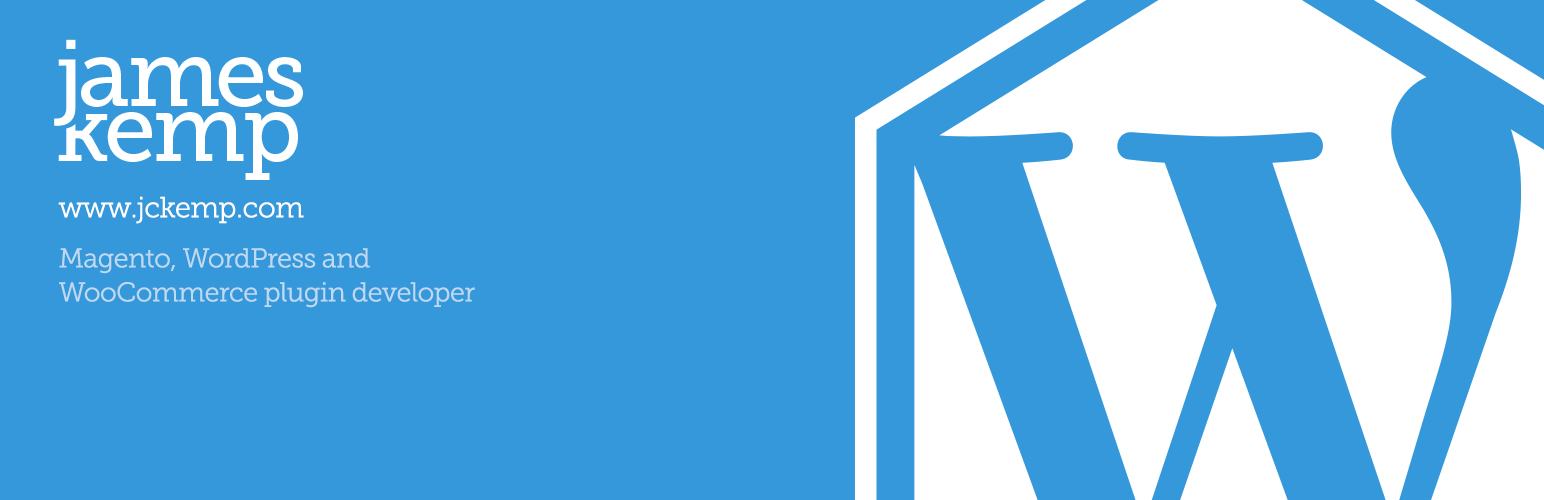
<style>
.page{position:relative;width:1544px;height:500px;background:#3498db}
.page>*{position:absolute;margin:0}
.t1{font:27px/34px "MuseoSlab-300";letter-spacing:-0.02em;color:#bfd9f1}
.t2{font:29px/40px "MuseoSlab-300";letter-spacing:-0.02em;color:#ffffff}
.t3{font:27px/33px "MuseoSlab-300";letter-spacing:-0.02em;color:#bfd9f1}
.t4{font:27px/28px "MuseoSlab-300";letter-spacing:-0.02em;color:#bfd9f1}
</style>
<div class="page">
<p class="t1" style="left:58px;top:196px;width:417px;height:112px"><span class="t2">www.jckemp.com<br> <br></span><span class="t3">Mage</span><span class="t4">nto, </span>WordPress and <br>WooCommerce plugin developer</p>
</div>
